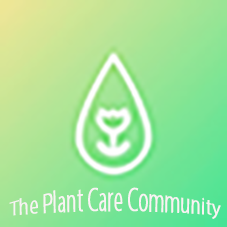
<style>
.page{position:relative;width:227px;height:227px}
.page>*{position:absolute;margin:0}
.t1{font:19px "MyriadPro-Regular";color:#f8f3f3}
</style>
<div class="page">
<p class="t1" style="left:9px;top:187px;width:212px;height:32px">The Plant Care Community</p>
</div>
